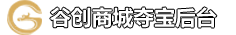
<style>
.page{position:relative;width:236px;height:35px;background:#ffffff}
.page>*{position:absolute;margin:0}
.t1{font:20.8px "MicrosoftYaHei-Bold";color:#ffffff;font-variant:small-caps}
</style>
<div class="page">
<p class="t1" style="left:50px;top:7px;width:167px;height:21px">谷创商城夺宝后台</p>
</div>
